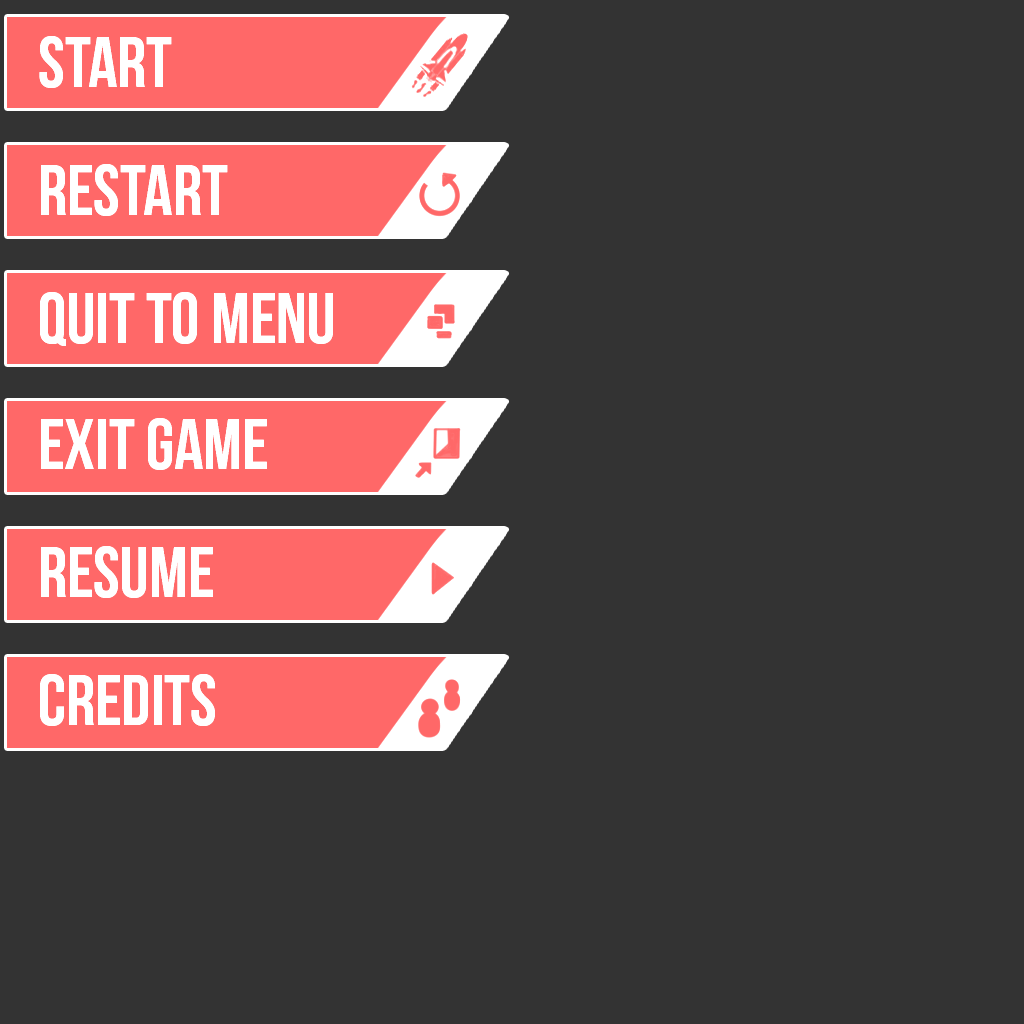
<style>
.page{position:relative;width:1024px;height:1024px;background:#333333}
.page>*{position:absolute;margin:0}
.t1{font:72px "BebasNeue";color:#ffffff}
</style>
<div class="page">
<p class="t1" style="left:39px;top:36px;width:133px;height:52px">Start</p>
<p class="t1" style="left:41px;top:164px;width:187px;height:52px">Restart</p>
<p class="t1" style="left:40px;top:292px;width:293px;height:54px">Quit to Menu</p>
<p class="t1" style="left:41px;top:418px;width:226px;height:52px">Exit Game</p>
<p class="t1" style="left:41px;top:546px;width:172px;height:52px">Resume</p>
<p class="t1" style="left:40px;top:674px;width:175px;height:52px">Credits</p>
</div>
